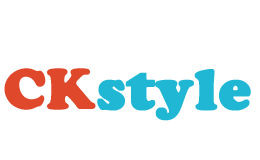
<style>
.page{position:relative;width:260px;height:160px;background:#ffffff}
.page>*{position:absolute;margin:0}
.t1{font:60px "CooperBlack";color:#20b7d4;font-weight:bold}
.t2{font:60px "CooperBlack";color:#df482b}
</style>
<div class="page">
<p class="t1" style="left:4px;top:68px;width:247px;height:53px"><span class="t2">CK</span>style</p>
</div>
